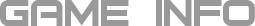
<style>
.page{position:relative;width:255px;height:26px;background:#999999}
.page>*{position:absolute;margin:0}
.t1{font:50px "Bitsumishi";color:#999999}
</style>
<div class="page">
<p class="t1" style="left:0px;top:0px;width:255px;height:26px">Game Info</p>
</div>
